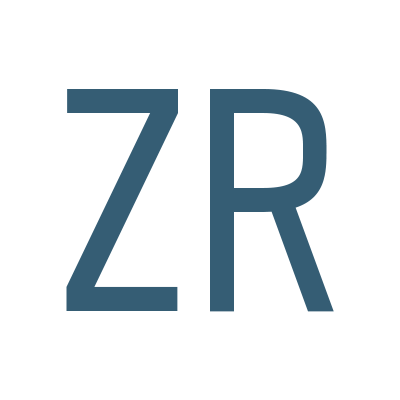
<style>
.page{position:relative;width:400px;height:400px;background:#ffffff}
.page>*{position:absolute;margin:0}
.t1{font:312.5px "qontra-Regular";color:#355d74}
</style>
<div class="page">
<p class="t1" style="left:66px;top:89px;width:268px;height:223px">ZR</p>
</div>
